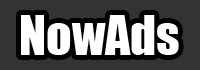
<style>
.page{position:relative;width:200px;height:70px;background:#333333}
.page>*{position:absolute;margin:0}
.t1{font:50px "Impact";color:#ffffff}
</style>
<div class="page">
<p class="t1" style="left:21px;top:15px;width:158px;height:40px">NowAds</p>
</div>
